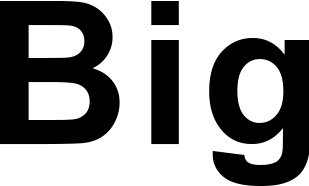
<style>
.page{position:relative;width:309px;height:186px;background:#ffffff}
.page>*{position:absolute;margin:0}
.t1{font:200px "Arial-BoldMT";letter-spacing:0.04em;color:#000000}
</style>
<div class="page">
<p class="t1" style="left:0px;top:1px;width:311px;height:185px">Big</p>
</div>
